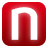
<style>
.page{position:relative;width:48px;height:48px;background:#ffffff}
.page>*{position:absolute;margin:0}
.t1{font:60px "UniSansRegular";color:#ffffff;font-weight:bold}
</style>
<div class="page">
<p class="t1" style="left:11px;top:7px;width:27px;height:33px">n</p>
</div>
